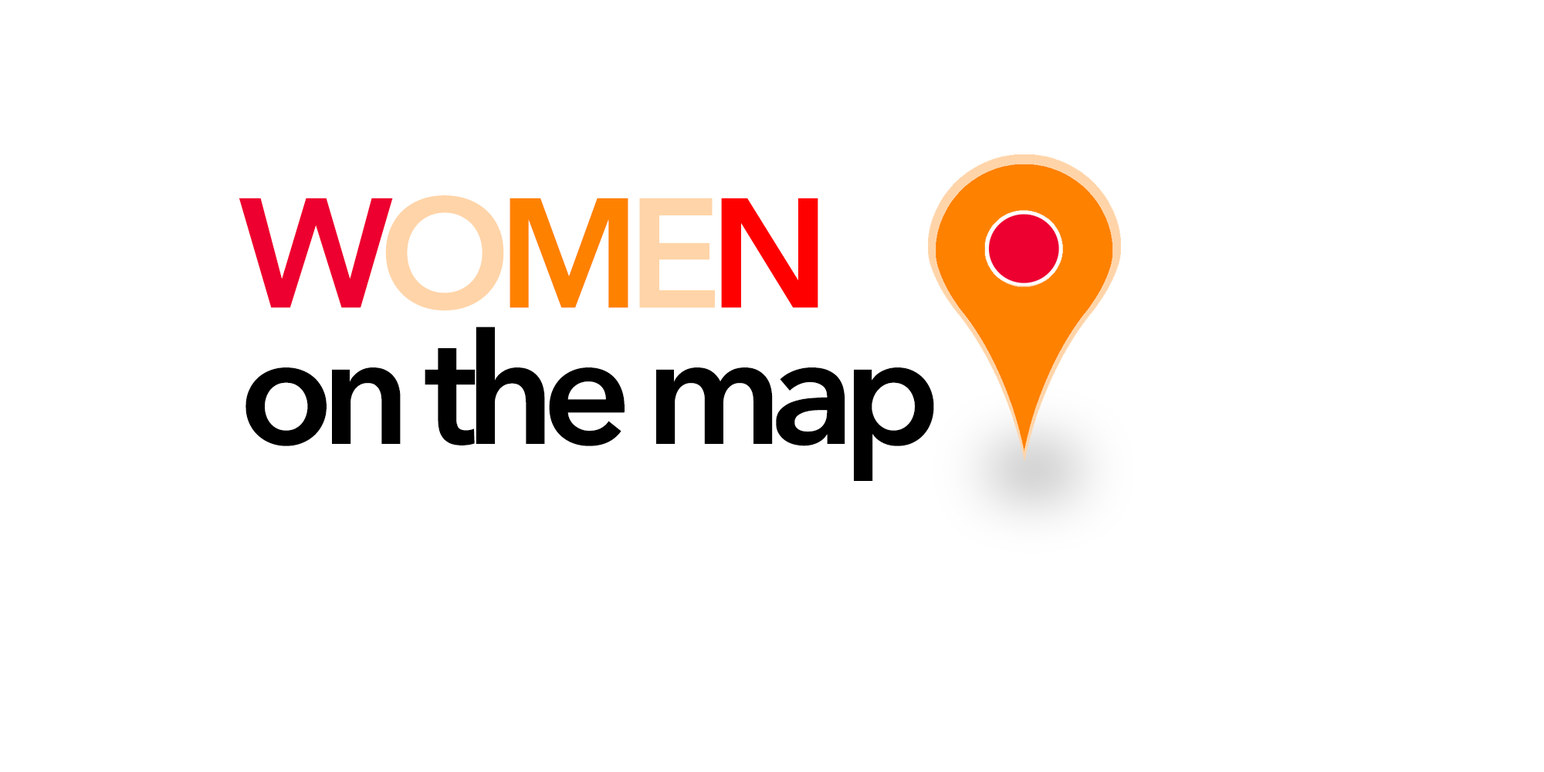
<style>
.page{position:relative;width:1544px;height:772px;background:#ffffff}
.page>*{position:absolute;margin:0}
.t1{font:154.4px "AvenirNext-DemiBold";letter-spacing:-0.08em;color:#ed002f}
.t2{font:154.4px "AvenirNext-DemiBold";letter-spacing:-0.08em;color:#ffd4a8}
.t3{font:154.4px "AvenirNext-DemiBold";letter-spacing:-0.08em;color:#ff8100}
.t4{font:154.4px "AvenirNext-DemiBold";letter-spacing:-0.08em;color:#ff0000}
.t5{font:154.4px "AvenirNext-DemiBold";letter-spacing:-0.08em;color:#000000}
</style>
<div class="page">
<p class="t1" style="left:239px;top:195px;width:579px;height:116px">W<span class="t2">O</span><span class="t3">M</span><span class="t2">E</span><span class="t4">N</span></p>
<p class="t5" style="left:246px;top:327px;width:688px;height:154px">on the map</p>
</div>
